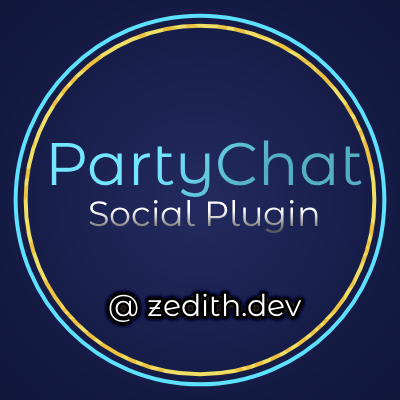
<style>
.page{position:relative;width:400px;height:400px}
.page>*{position:absolute;margin:0}
.t1{font:60px "MontserratAlternates-Regular"}
.t2{font:35px "MontserratAlternates-Regular"}
.t3{font:30px "MontserratAlternates-Regular";color:#ffffff}
</style>
<div class="page">
<p class="t1" style="left:51px;top:140px;width:311px;height:57px">PartyChat</p>
<p class="t2" style="left:89px;top:200px;width:229px;height:33px">Social Plugin</p>
<p class="t3" style="left:109px;top:293px;width:193px;height:29px">@ zedith.dev</p>
</div>
